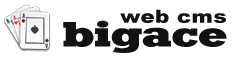
<style>
.page{position:relative;width:234px;height:60px;background:#ffffff}
.page>*{position:absolute;margin:0}
.t1{font:18px "Arial-Black";letter-spacing:0.01em;color:#131212;scale:1.2 1}
.t2{font:34px "Roland";letter-spacing:0.01em;color:#131212;scale:1.2 1}
</style>
<div class="page">
<p class="t1" style="left:120px;top:9px;width:106px;height:14px">web cms</p>
<p class="t2" style="left:63px;top:20px;width:164px;height:33px">bigace</p>
</div>
